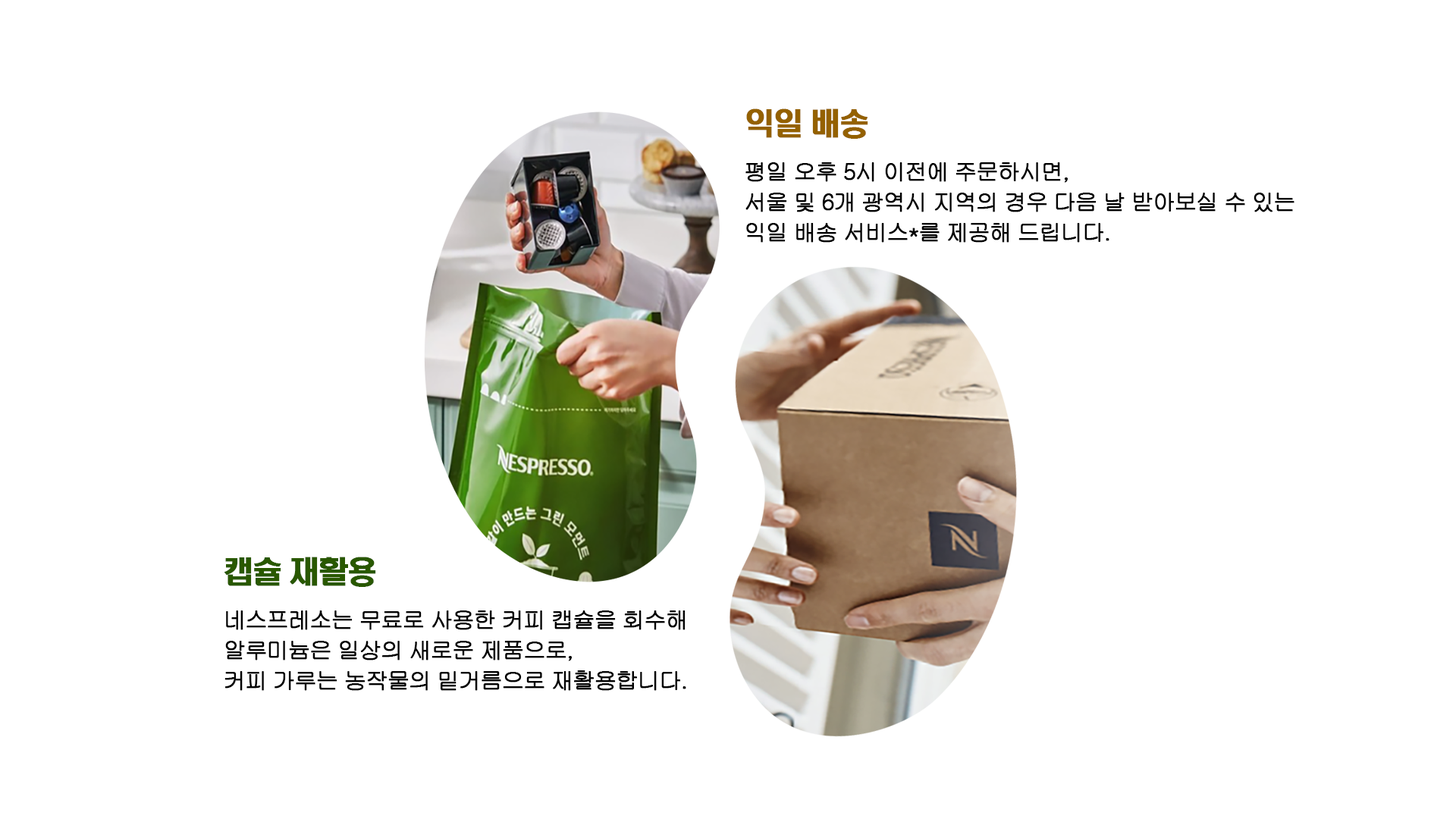
<style>
.page{position:relative;width:1456px;height:819px;background:#ffffff}
.page>*{position:absolute;margin:0}
.t1{font:22.8px/30.4px "Gulim";letter-spacing:-0.08em;color:#000000;font-weight:bold}
.t2{font:30.4px/45.6px "H2hdrM";letter-spacing:-0.08em;color:#946100;font-weight:bold}
.t3{font:22.8px/45.6px "Gulim";letter-spacing:-0.08em;color:#000000;font-weight:bold}
.t4{font:30.4px/45.6px "H2hdrM";letter-spacing:-0.08em;color:#295800;font-weight:bold}
</style>
<div class="page">
<p class="t1" style="left:745px;top:108px;width:549px;height:135px"><span class="t2">익일 배송<br></span><span class="t3">평일 오후 5시 이전에 주문하시면, <br></span>서울 및 6개 광역시 지역의 경우 다음 날 받아보실 수 있는 <br>익일 배송 서비스*를 제공해 드립니다.</p>
<p class="t1" style="left:224px;top:557px;width:462px;height:134px"><span class="t4">캡슐 재활용<br></span><span class="t3">네스프레소는 무료로 사용한 커피 캡슐을 회수해 <br></span>알루미늄은 일상의 새로운 제품으로,<br>커피 가루는 농작물의 밑거름으로 재활용합니다.</p>
</div>
